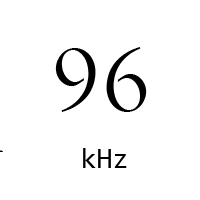
<style>
.page{position:relative;width:200px;height:200px;background:#ffffff}
.page>*{position:absolute;margin:0}
.t1{font:100px "Centaur";color:#000000}
.t2{font:29.2px "Consolas";color:#000000}
</style>
<div class="page">
<p class="t1" style="left:55px;top:47px;width:92px;height:65px">96</p>
<p class="t2" style="left:83px;top:148px;width:44px;height:20px">kHz</p>
</div>
